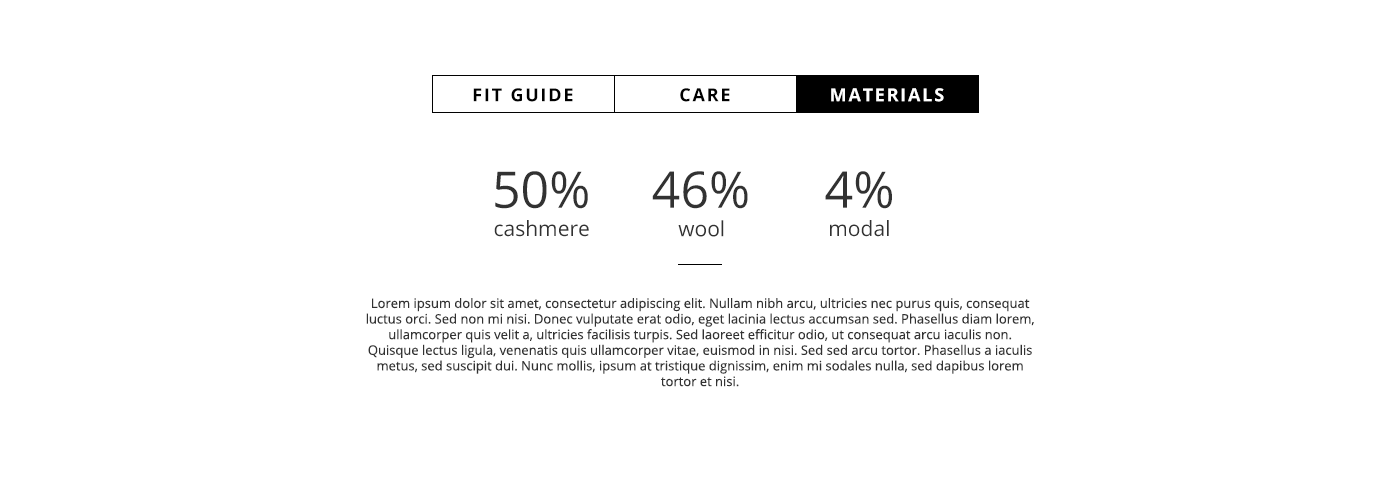
<style>
.page{position:relative;width:1400px;height:500px;background:#ffffff}
.page>*{position:absolute;margin:0}
.t1{font:18px "OpenSans-Bold";letter-spacing:0.1em;color:#000000;text-transform:uppercase}
.t2{font:18px "OpenSans-Bold";letter-spacing:0.1em;color:#ffffff;text-transform:uppercase}
.t3{font:50.5px "OpenSans";color:#323232}
.t4{font:50.6px "OpenSans";color:#323232}
.t5{font:21px "OpenSans";color:#323232}
.t6{font:13px "OpenSans";color:#323232}
</style>
<div class="page">
<p class="t1" style="left:473px;top:88px;width:100px;height:14px">fit guide</p>
<p class="t1" style="left:680px;top:88px;width:50px;height:14px">care</p>
<p class="t2" style="left:831px;top:88px;width:113px;height:14px">materials</p>
<p class="t2" style="left:831px;top:88px;width:113px;height:14px">materials</p>
<p class="t3" style="left:495px;top:171px;width:93px;height:38px">50%</p>
<p class="t4" style="left:652px;top:171px;width:96px;height:38px">46%</p>
<p class="t3" style="left:825px;top:171px;width:67px;height:38px">4%</p>
<p class="t5" style="left:494px;top:220px;width:95px;height:17px">cashmere</p>
<p class="t5" style="left:678px;top:220px;width:46px;height:17px">wool</p>
<p class="t5" style="left:830px;top:220px;width:59px;height:17px">modal</p>
<p class="t6" style="left:366px;top:298px;width:668px;height:89px;text-align:center">Lorem ipsum dolor sit amet, consectetur adipiscing elit. Nullam nibh arcu, ultricies nec purus quis, consequat luctus orci. Sed non mi nisi. Donec vulputate erat odio, eget lacinia lectus accumsan sed. Phasellus diam lorem, ullamcorper quis velit a, ultricies facilisis turpis. Sed laoreet efficitur odio, ut consequat arcu iaculis non. Quisque lectus ligula, venenatis quis ullamcorper vitae, euismod in nisi. Sed sed arcu tortor. Phasellus a iaculis metus, sed suscipit dui. Nunc mollis, ipsum at tristique dignissim, enim mi sodales nulla, sed dapibus lorem tortor et nisi.</p>
</div>
